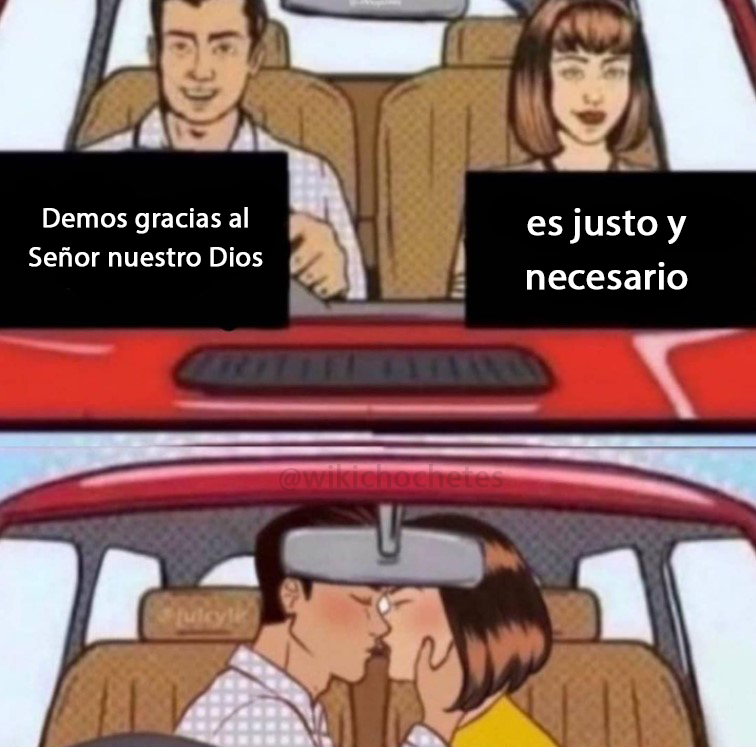
<style>
.page{position:relative;width:756px;height:747px}
.page>*{position:absolute;margin:0}
.t1{font:28px "MyriadPro-Regular";color:#ffffff;font-weight:bold}
.t2{font:39px "MyriadPro-Regular";color:#ffffff;font-weight:bold}
.t3{font:31.9px "MyriadPro-Regular";color:#9f2335;font-weight:bold}
</style>
<div class="page">
<p class="t1" style="left:29px;top:207px;width:234px;height:60px;text-align:center">Demos gracias al<br>Señor nuestro Dios</p>
<p class="t2" style="left:527px;top:208px;width:161px;height:82px;text-align:center">es justo y<br>necesario</p>
<p class="t3" style="left:279px;top:464px;width:224px;height:27px">@wikichochetes</p>
</div>
